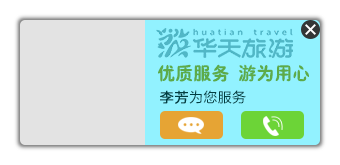
<style>
.page{position:relative;width:340px;height:165px;background:#e3e3e3}
.page>*{position:absolute;margin:0}
.t1{font:18px "HYx1gj";color:#5dab48}
.t2{font:14px "FZLTHK--GBK1-0";letter-spacing:0.025em;color:#013e42;text-transform:uppercase}
.t3{font:14px "FZLTHK--GBK1-0";letter-spacing:0.025em;color:#013e42;text-transform:uppercase;font-weight:bold}
</style>
<div class="page">
<p class="t1" style="left:158px;top:64px;width:151px;height:18px">优质服务 游为用心</p>
<p class="t2" style="left:160px;top:90px;width:86px;height:14px"><span class="t3">李芳</span>为您服务</p>
</div>
